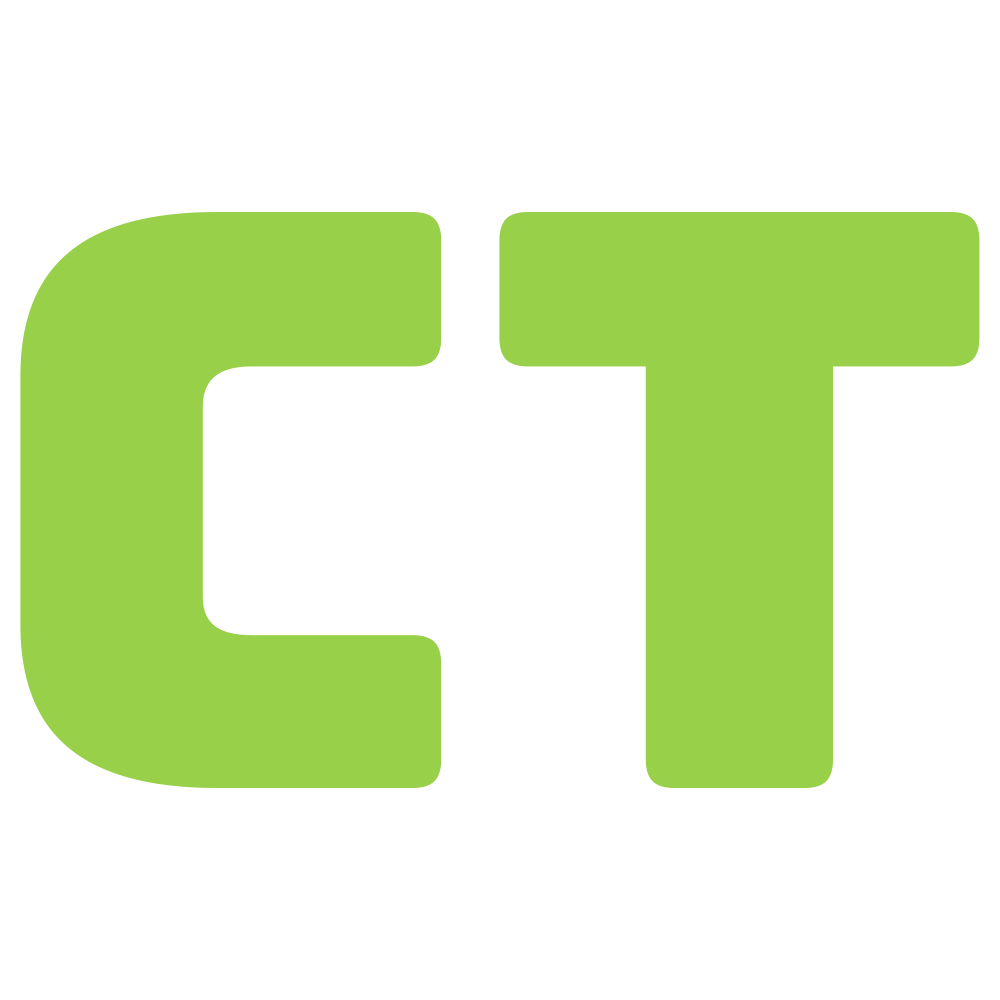
<style>
.page{position:relative;width:1000px;height:1000px;background:#ffffff}
.page>*{position:absolute;margin:0}
.t1{font:800px "Bungee-Regular";color:#98d049}
</style>
<div class="page">
<p class="t1" style="left:20px;top:212px;width:960px;height:576px">CT</p>
</div>
